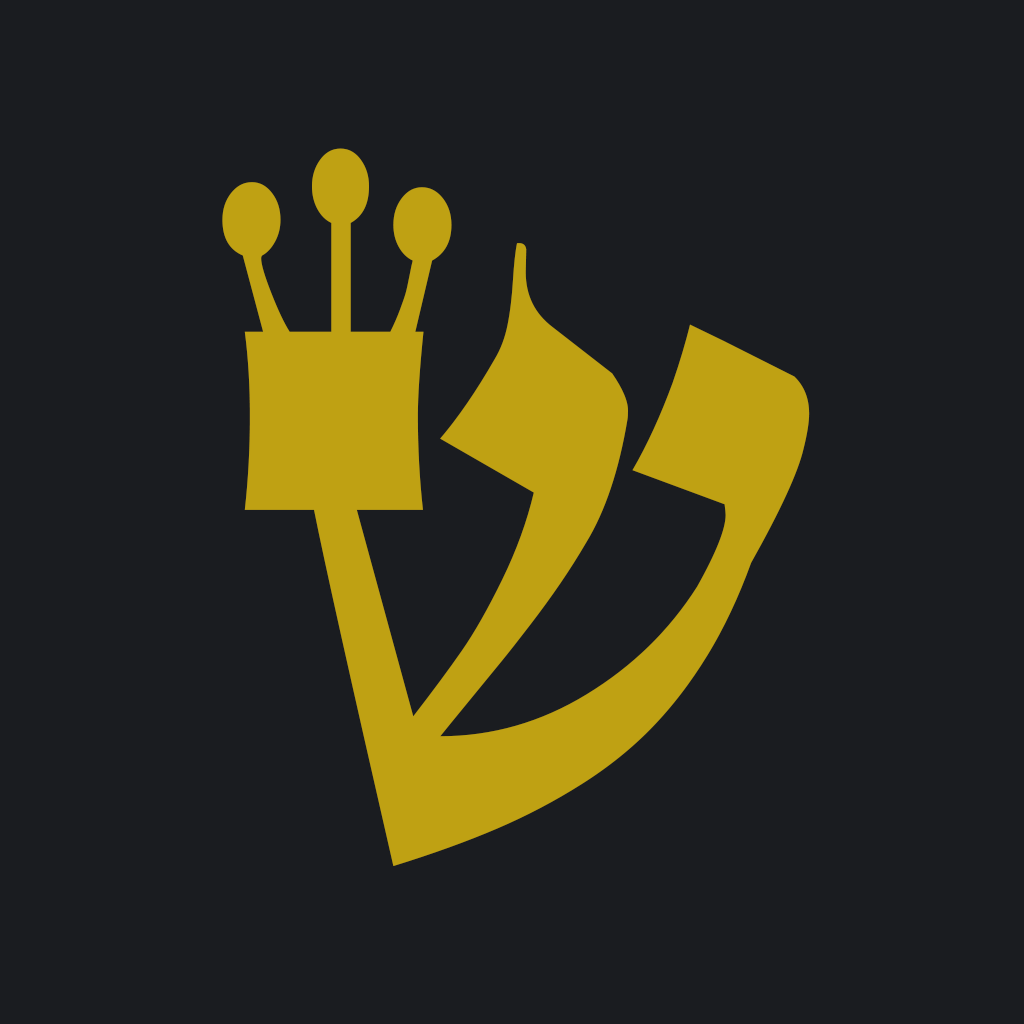
<style>
.page{position:relative;width:1024px;height:1024px;background:#1a1c20}
.page>*{position:absolute;margin:0}
.t1{font:1041.7px "StamAshkenazCLM";color:#bfa113}
</style>
<div class="page">
<p class="t1" style="left:222px;top:148px;width:588px;height:718px">ש</p>
</div>
